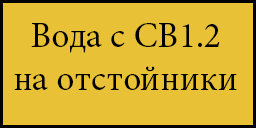
<style>
.page{position:relative;width:256px;height:128px;background:#e8c137}
.page>*{position:absolute;margin:0}
.t1{font:36px "MinionPro-Regular";color:#000000}
</style>
<div class="page">
<p class="t1" style="left:14px;top:23px;width:223px;height:67px;text-align:center">Вода с СВ1.2<br>на отстойники</p>
</div>
